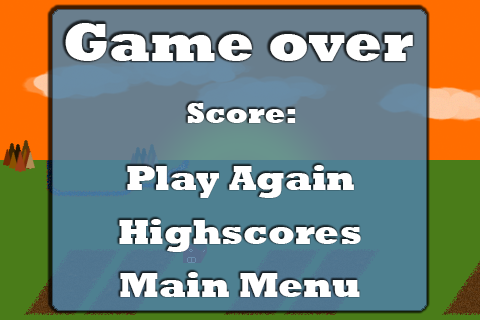
<style>
.page{position:relative;width:480px;height:320px}
.page>*{position:absolute;margin:0}
.t1{font:55px "Rockwell-ExtraBold";color:#ffffff}
.t2{font:30px "Rockwell-ExtraBold";color:#ffffff}
.t3{font:36px "Rockwell-ExtraBold";color:#ffffff}
</style>
<div class="page">
<p class="t1" style="left:65px;top:23px;width:348px;height:38px">Game over</p>
<p class="t2" style="left:187px;top:103px;width:109px;height:20px">Score:</p>
<p class="t3" style="left:127px;top:165px;width:227px;height:33px">Play Again</p>
<p class="t3" style="left:119px;top:219px;width:242px;height:33px">Highscores</p>
<p class="t3" style="left:120px;top:272px;width:240px;height:25px">Main Menu</p>
</div>
